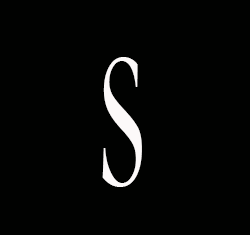
<style>
.page{position:relative;width:250px;height:235px;background:#010201}
.page>*{position:absolute;margin:0}
.t1{font:200px "STKaiti";color:#fcf9f9;scale:0.49 1}
</style>
<div class="page">
<p class="t1" style="left:102px;top:57px;width:40px;height:130px">S</p>
</div>
